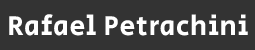
<style>
.page{position:relative;width:255px;height:50px;background:#333333}
.page>*{position:absolute;margin:0}
.t1{font:28px "SecularOne-Regular";letter-spacing:0.025em;color:#ffffff}
</style>
<div class="page">
<p class="t1" style="left:9px;top:14px;width:239px;height:22px">Rafael Petrachini</p>
</div>
